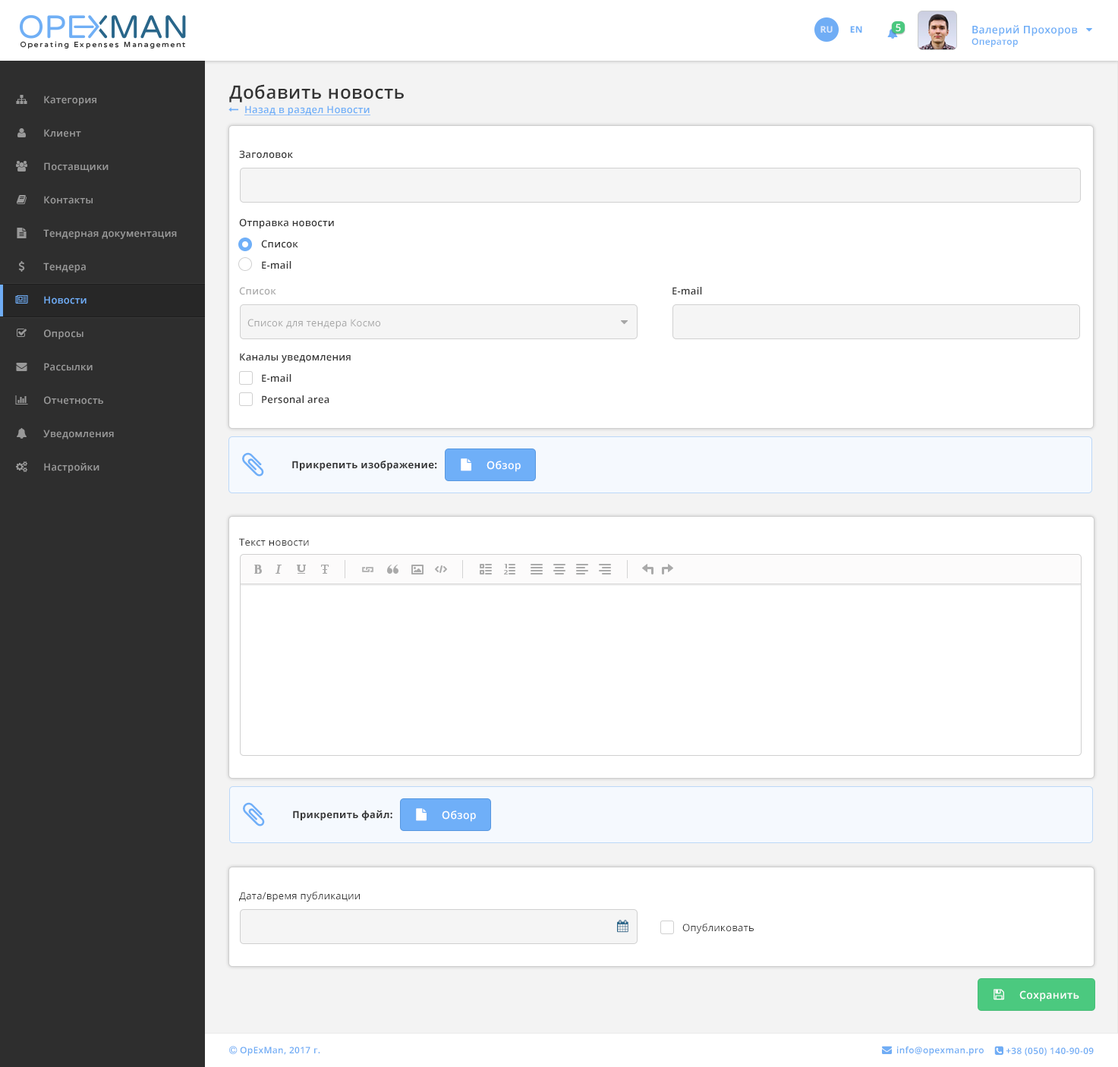
<style>
.page{position:relative;width:1118px;height:1067px;background:#ffffff}
.page>*{position:absolute;margin:0}
.t1{font:9.1px "OpenSans-Bold";letter-spacing:0.025em;color:#dbe8fc;text-transform:uppercase}
.t2{font:9.1px "OpenSans-Bold";letter-spacing:0.025em;color:#6faff8;text-transform:uppercase}
.t3{font:9.9px "OpenSans-Semibold";letter-spacing:0.025em;color:#ffffff}
.t4{font:10.6px "OpenSans-Semibold";letter-spacing:0.025em;color:#6eaef7}
.t5{font:9.1px "OpenSans-Semibold";letter-spacing:0.025em;color:#6eaef7}
.t6{font:18.2px "OpenSans-Semibold";letter-spacing:0.025em;color:#333333}
.t7{font:9.9px "OpenSans-Semibold";letter-spacing:0.025em;color:#999999}
.t8{font:9.9px "OpenSans-Semibold";letter-spacing:0.025em;color:#6faff8;text-decoration:underline}
.t9{font:9.9px "OpenSans-Semibold";letter-spacing:0.025em;color:#333333}
.t10{font:9.9px "OpenSans-Semibold";letter-spacing:0.025em;color:#adadad}
.t11{font:9.9px "OpenSans-Semibold";letter-spacing:0.025em;color:#70adf5}
.t12{font:9.9px "OpenSans";letter-spacing:0.025em;color:#a6a6a6}
.t13{font:9.9px "OpenSans-Bold";letter-spacing:0.025em;color:#333333}
.t14{font:10.6px "OpenSans-Semibold";letter-spacing:0.025em;color:#ffffff}
.t15{font:9.9px "OpenSans";letter-spacing:0.025em;color:#333333}
.t16{font:9.9px "OpenSans";letter-spacing:0.025em;color:#3a3a3a}
</style>
<div class="page">
<p class="t1" style="left:820px;top:26px;width:12px;height:7px">Ru</p>
<p class="t2" style="left:850px;top:26px;width:12px;height:7px">EN</p>
<p class="t3" style="left:895px;top:24px;width:6px;height:8px">5</p>
<p class="t4" style="left:971px;top:25px;width:106px;height:22px">Валерий Прохоров<br><span class="t5">Оператор</span></p>
<p class="t6" style="left:229px;top:84px;width:175px;height:18px">Добавить новость</p>
<p class="t7" style="left:44px;top:96px;width:52px;height:9px">Категория</p>
<p class="t8" style="left:244px;top:105px;width:126px;height:10px">Назад в раздел Новости</p>
<p class="t7" style="left:44px;top:129px;width:37px;height:8px">Клиент</p>
<p class="t9" style="left:239px;top:150px;width:54px;height:9px">Заголовок</p>
<p class="t7" style="left:44px;top:162px;width:65px;height:10px">Поставщики</p>
<p class="t7" style="left:44px;top:196px;width:49px;height:8px">Контакты</p>
<p class="t9" style="left:239px;top:219px;width:95px;height:9px">Отправка новости</p>
<p class="t7" style="left:43px;top:229px;width:134px;height:10px">Тендерная документация</p>
<p class="t9" style="left:261px;top:240px;width:37px;height:8px">Список</p>
<p class="t7" style="left:43px;top:263px;width:43px;height:9px">Тендера</p>
<p class="t9" style="left:262px;top:261px;width:29px;height:8px">E-mail</p>
<p class="t10" style="left:239px;top:287px;width:37px;height:8px">Список</p>
<p class="t9" style="left:672px;top:287px;width:30px;height:8px">E-mail</p>
<p class="t11" style="left:44px;top:296px;width:43px;height:8px">Новости</p>
<p class="t7" style="left:44px;top:329px;width:39px;height:10px">Опросы</p>
<p class="t12" style="left:247px;top:319px;width:133px;height:10px">Список для тендера Космо</p>
<p class="t9" style="left:240px;top:353px;width:111px;height:10px">Каналы уведомления</p>
<p class="t7" style="left:44px;top:363px;width:49px;height:8px">Рассылки</p>
<p class="t9" style="left:262px;top:374px;width:29px;height:8px">E-mail</p>
<p class="t7" style="left:44px;top:396px;width:59px;height:8px">Отчетность</p>
<p class="t9" style="left:262px;top:395px;width:67px;height:9px">Personal area</p>
<p class="t7" style="left:43px;top:429px;width:71px;height:10px">Уведомления</p>
<p class="t13" style="left:292px;top:461px;width:145px;height:9px">Прикрепить изображение:</p>
<p class="t14" style="left:486px;top:461px;width:35px;height:11px">Обзор</p>
<p class="t7" style="left:44px;top:463px;width:55px;height:10px">Настройки</p>
<p class="t15" style="left:239px;top:538px;width:70px;height:8px">Текст новости</p>
<p class="t13" style="left:293px;top:810px;width:99px;height:10px">Прикрепить файл:</p>
<p class="t14" style="left:442px;top:810px;width:34px;height:12px">Обзор</p>
<p class="t15" style="left:239px;top:892px;width:121px;height:9px">Дата/время публикации</p>
<p class="t16" style="left:682px;top:923px;width:71px;height:10px">Опубликовать</p>
<p class="t14" style="left:1019px;top:990px;width:60px;height:12px">Сохранить</p>
</div>
